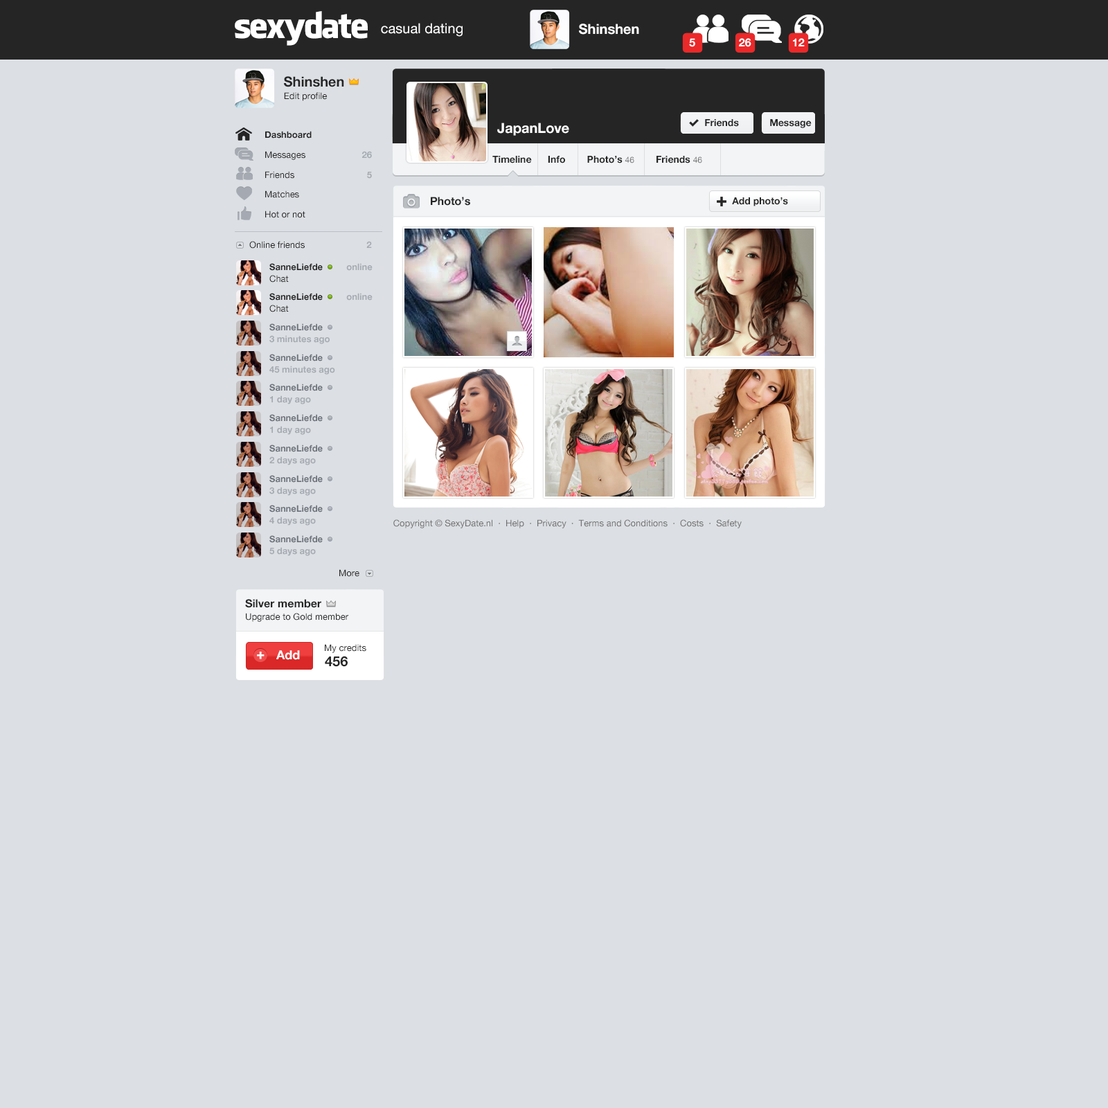
<style>
.page{position:relative;width:1108px;height:1108px;background:#dcdfe3}
.page>*{position:absolute;margin:0}
.t1{font:34.6px "FacebookLetterFaces";letter-spacing:-0.05em;color:#ffffff}
.t2{font:13.8px "HelveticaNeue";color:#ffffff}
.t3{font:13.8px "HelveticaNeue-Bold";color:#ffffff}
.t4{font:11.1px "HelveticaNeue-Bold";color:#ffffff}
.t5{font:13.8px "HelveticaNeue-Bold";color:#252525}
.t6{font:9px "HelveticaNeue";color:#252525}
.t7{font:9.7px "HelveticaNeue-Bold";color:#252525}
.t8{font:9px/20px "HelveticaNeue";color:#252525}
.t9{font:9px/20px "HelveticaNeue-Bold";color:#252525}
.t10{font:9px/20px "HelveticaNeue-Bold";color:#a5aab2}
.t11{font:8.3px "HelveticaNeue";color:#737373}
.t12{font:11.1px "HelveticaNeue-Bold";color:#252525}
.t13{font:9px "HelveticaNeue-Bold";color:#a5aab2}
.t14{font:9px/11.8px "HelveticaNeue-Bold";color:#252525}
.t15{font:9px/11.8px "HelveticaNeue-Bold";color:#a5aab2}
.t16{font:9px/11.8px "HelveticaNeue";color:#252525}
.t17{font:9px/11.8px "HelveticaNeue-Bold";color:#6d727b}
.t18{font:9px "HelveticaNeue";color:#707070}
.t19{font:13.2px "HelveticaNeue-Bold";color:#ffffff;font-weight:bold}
.t20{font:12.5px "HelveticaNeue-Bold";color:#ffffff}
</style>
<div class="page">
<p class="t1" style="left:235px;top:11px;width:133px;height:35px">sexydate</p>
<p class="t2" style="left:381px;top:23px;width:81px;height:14px">casual dating</p>
<p class="t3" style="left:579px;top:24px;width:60px;height:11px">Shinshen</p>
<p class="t4" style="left:689px;top:38px;width:6px;height:9px">5</p>
<p class="t4" style="left:739px;top:38px;width:12px;height:9px">26</p>
<p class="t4" style="left:793px;top:38px;width:11px;height:8px">12</p>
<p class="t5" style="left:284px;top:76px;width:60px;height:11px">Shinshen</p>
<p class="t6" style="left:284px;top:92px;width:43px;height:9px">Edit profile</p>
<p class="t3" style="left:497px;top:123px;width:72px;height:13px">JapanLove</p>
<p class="t7" style="left:705px;top:119px;width:34px;height:8px">Friends</p>
<p class="t7" style="left:770px;top:119px;width:41px;height:9px">Message</p>
<p class="t8" style="left:265px;top:131px;width:47px;height:87px"><span class="t9">Dashboard<br></span>Messages<br>Friends<br>Matches<br>Hot or not</p>
<p class="t10" style="left:362px;top:151px;width:10px;height:28px;text-align:right">26<br>5</p>
<p class="t7" style="left:492px;top:156px;width:210px;height:7px">Timeline      Info        Photo’s <span class="t11">46</span>        Friends <span class="t11">46</span></p>
<p class="t12" style="left:431px;top:197px;width:39px;height:9px">Photo’s</p>
<p class="t7" style="left:732px;top:197px;width:56px;height:9px">Add photo’s</p>
<p class="t6" style="left:249px;top:241px;width:123px;height:8px">Online friends      <span class="t13">2</span></p>
<p class="t14" style="left:269px;top:263px;width:103px;height:19px">SanneLiefde          <span class="t15">online<br></span><span class="t16">Chat</span></p>
<p class="t14" style="left:269px;top:293px;width:103px;height:19px">SanneLiefde          <span class="t15">online<br></span><span class="t16">Chat</span></p>
<p class="t15" style="left:269px;top:323px;width:61px;height:21px"><span class="t17">SanneLiefde<br></span>3 minutes ago</p>
<p class="t15" style="left:269px;top:354px;width:66px;height:21px"><span class="t17">SanneLiefde<br></span>45 minutes ago</p>
<p class="t17" style="left:269px;top:384px;width:54px;height:20px">SanneLiefde<br><span class="t15">1 day ago</span></p>
<p class="t17" style="left:269px;top:414px;width:54px;height:21px">SanneLiefde<br><span class="t15">1 day ago</span></p>
<p class="t17" style="left:269px;top:444px;width:54px;height:21px">SanneLiefde<br><span class="t15">2 days ago</span></p>
<p class="t17" style="left:269px;top:475px;width:54px;height:21px">SanneLiefde<br><span class="t15">3 days ago</span></p>
<p class="t17" style="left:269px;top:505px;width:54px;height:20px">SanneLiefde<br><span class="t15">4 days ago</span></p>
<p class="t18" style="left:393px;top:519px;width:348px;height:9px">Copyright © SexyDate.nl  ·  Help  ·  Privacy  ·  Terms and Conditions  ·  Costs  ·  Safety</p>
<p class="t17" style="left:269px;top:535px;width:54px;height:21px">SanneLiefde<br><span class="t15">5 days ago</span></p>
<p class="t6" style="left:339px;top:569px;width:20px;height:8px">More</p>
<p class="t12" style="left:245px;top:599px;width:76px;height:9px">Silver member</p>
<p class="t6" style="left:246px;top:613px;width:102px;height:9px">Upgrade to Gold member</p>
<p class="t19" style="left:257px;top:651px;width:7px;height:8px">+</p>
<p class="t20" style="left:276px;top:650px;width:24px;height:10px">Add</p>
<p class="t6" style="left:325px;top:644px;width:41px;height:9px">My credits</p>
<p class="t5" style="left:325px;top:656px;width:23px;height:11px">456</p>
</div>
